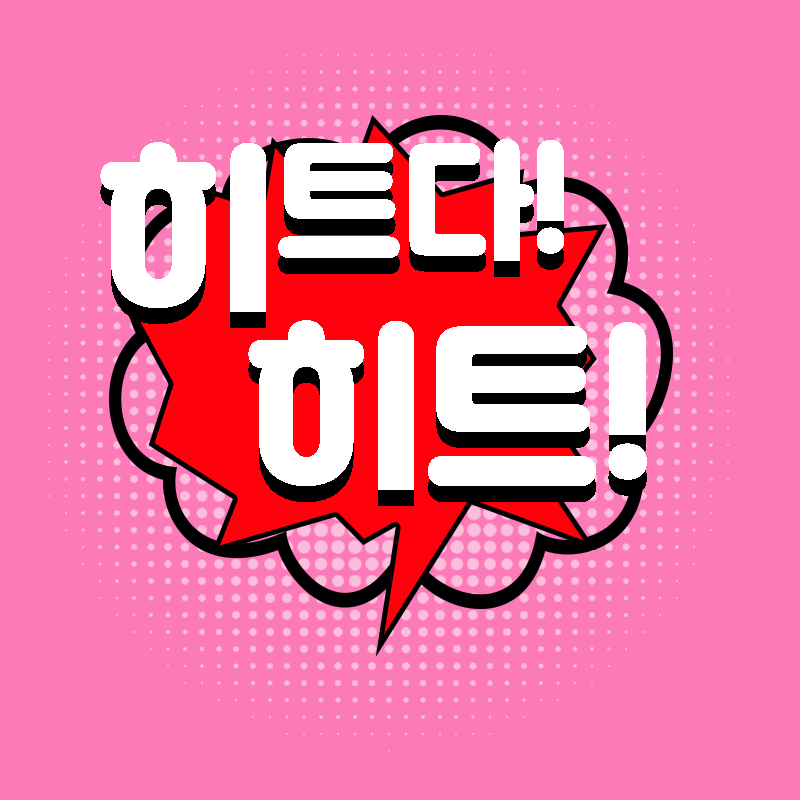
<style>
.page{position:relative;width:800px;height:800px;background:#fd7ab9}
.page>*{position:absolute;margin:0}
.t1{font:130px/100px "Jalnan";letter-spacing:-0.02em;color:#ffffff}
.t2{font:180px/100px "Jalnan";letter-spacing:-0.02em;color:#ffffff}
.t3{font:180px/160px "Jalnan";letter-spacing:-0.02em;color:#ffffff}
</style>
<div class="page">
<p class="t1" style="left:100px;top:139px;width:547px;height:351px;text-align:center"><span class="t2"><br> 히</span>트다!<br>      <span class="t3">히트!</span></p>
<p class="t1" style="left:100px;top:155px;width:547px;height:351px;text-align:center"><span class="t2"><br> 히</span>트다!<br>      <span class="t3">히트!</span></p>
</div>
